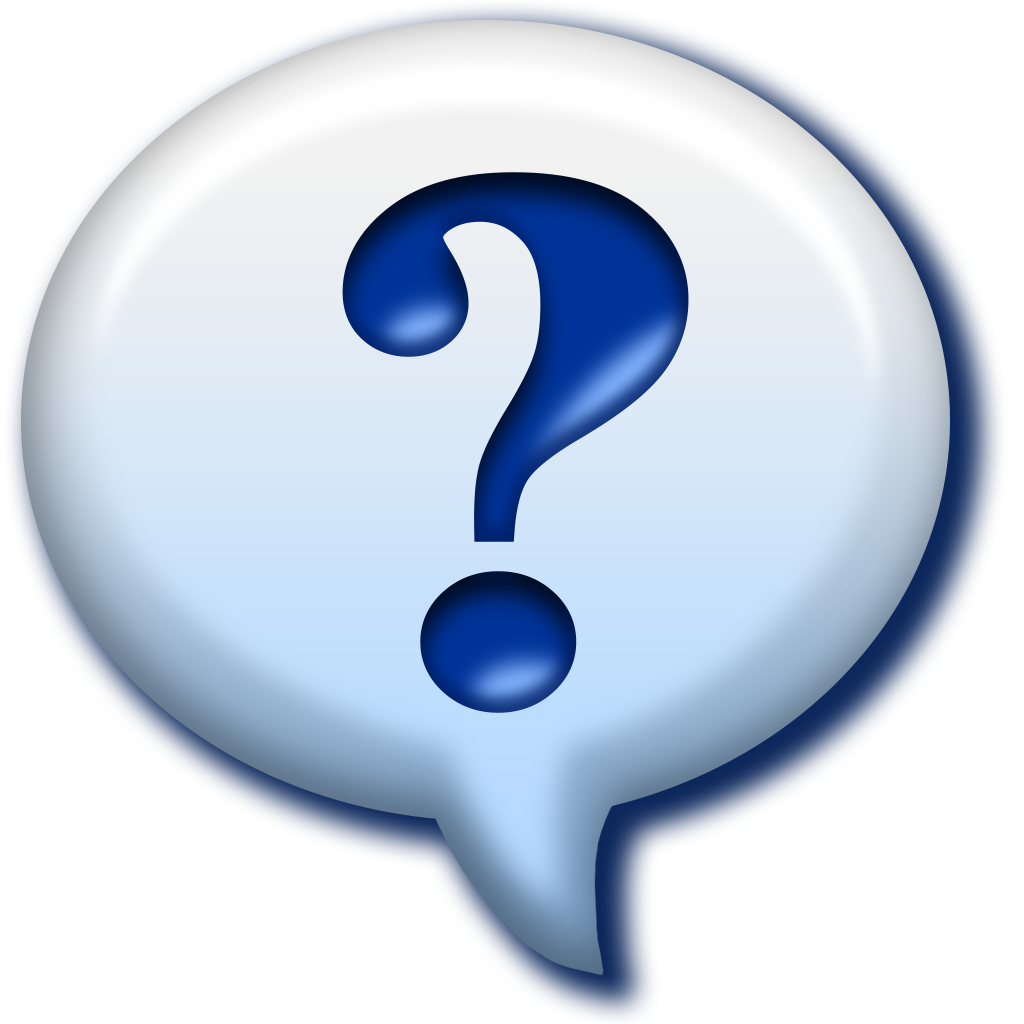
<style>
.page{position:relative;width:1024px;height:1024px;background:#ffffff}
.page>*{position:absolute;margin:0}
.t1{font:749.3px "TimesNewRomanPS-BoldMT";letter-spacing:-0.025em;font-weight:bold;scale:1.12 1}
</style>
<div class="page">
<p class="t1" style="left:342px;top:172px;width:347px;height:541px">?</p>
</div>
